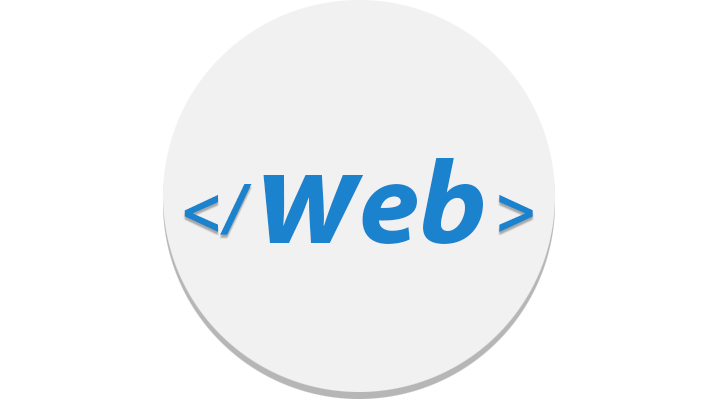
<style>
.page{position:relative;width:720px;height:400px;background:#ffffff}
.page>*{position:absolute;margin:0}
.t1{font:120px "MyriadPro-BoldIt";color:#1b83cd}
.t2{font:70px "MyriadPro-BoldIt";color:#1b83cd}
.t3{font:140px "MyriadPro-BoldIt";color:#1b83cd}
</style>
<div class="page">
<p class="t1" style="left:263px;top:158px;width:220px;height:86px"><span class="t2">     </span><span class="t3">w</span>eb</p>
</div>
